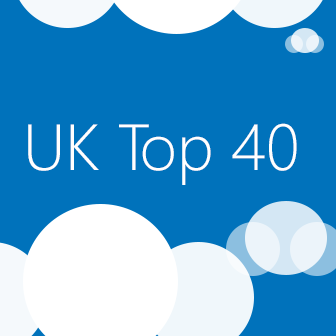
<style>
.page{position:relative;width:336px;height:336px;background:#0072bb}
.page>*{position:absolute;margin:0}
.t1{font:65px "SegoeUI-Light";color:#ffffff}
</style>
<div class="page">
<p class="t1" style="left:28px;top:123px;width:269px;height:62px">UK Top 40</p>
</div>
